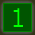
<style>
.page{position:relative;width:35px;height:35px;background:#005500}
.page>*{position:absolute;margin:0}
.t1{font:30px "Courier";letter-spacing:0.018em;color:#00ff00}
</style>
<div class="page">
<p class="t1" style="left:13px;top:8px;width:10px;height:19px">1</p>
</div>
